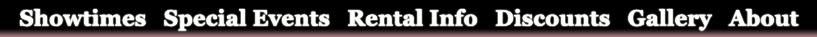
<style>
.page{position:relative;width:817px;height:37px;background:#000000}
.page>*{position:absolute;margin:0}
.t1{font:22px "Georgia-Bold";letter-spacing:0.01em;color:#ffffff}
</style>
<div class="page">
<p class="t1" style="left:20px;top:9px;width:779px;height:22px">Showtimes   Special Events   Rental Info   Discounts   Gallery   About Us</p>
</div>
